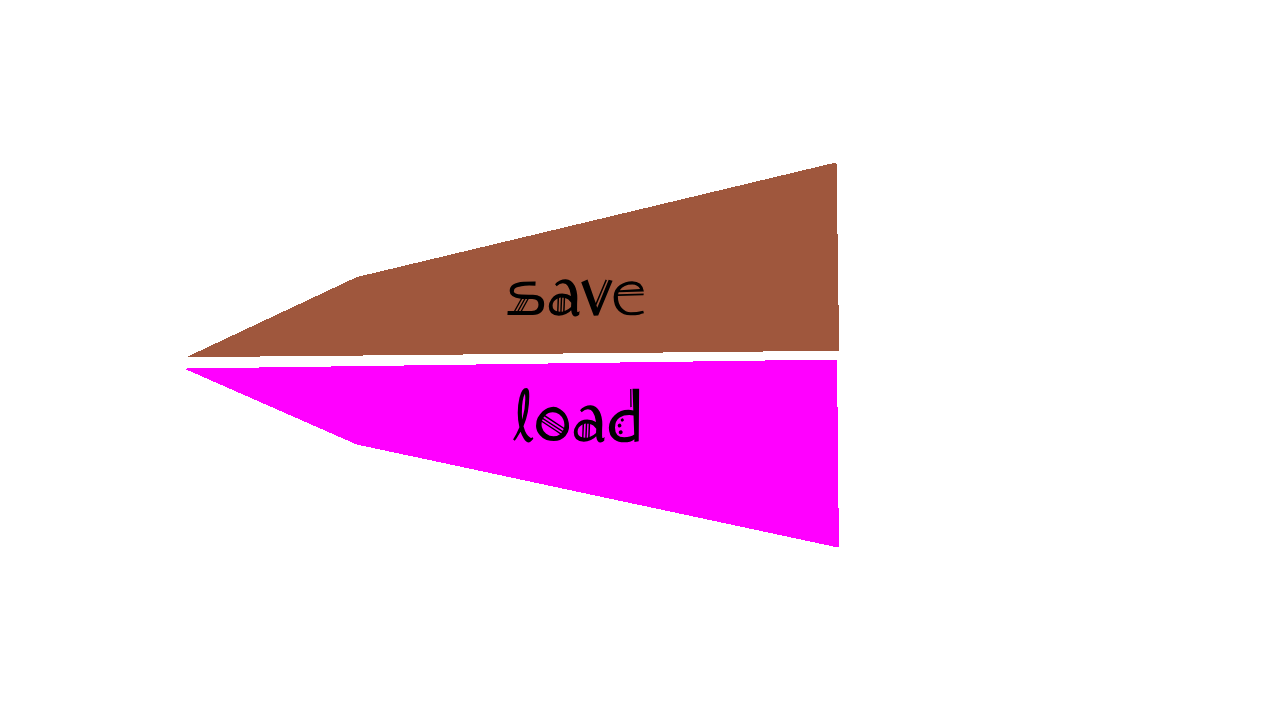
<style>
.page{position:relative;width:1280px;height:720px;background:#ffffff}
.page>*{position:absolute;margin:0}
.t1{font:75px "Amadeus-Regular";color:#000000}
</style>
<div class="page">
<p class="t1" style="left:507px;top:279px;width:137px;height:38px">save</p>
<p class="t1" style="left:513px;top:387px;width:127px;height:56px">load</p>
</div>
